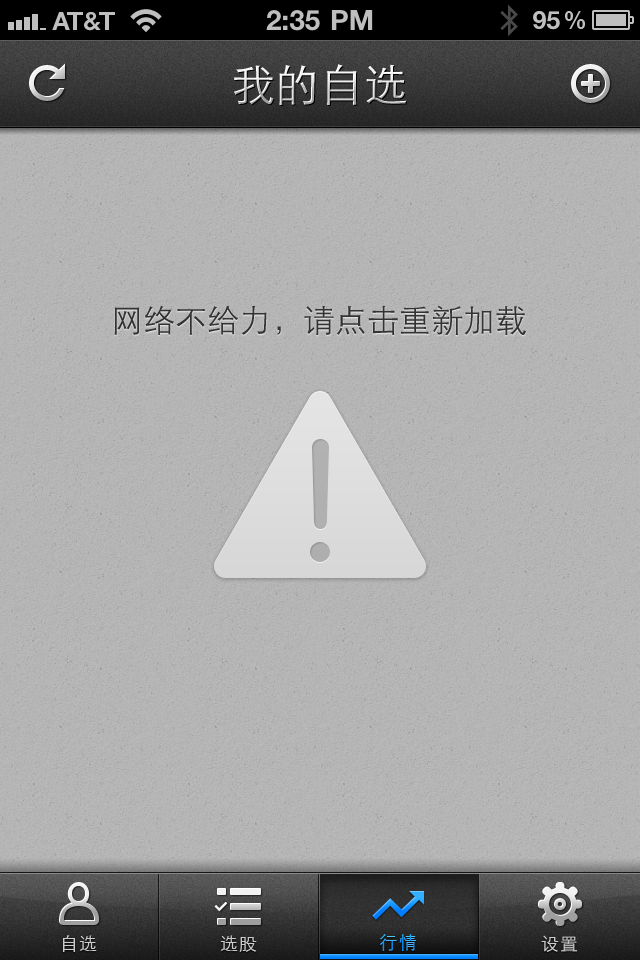
<style>
.page{position:relative;width:640px;height:960px}
.page>*{position:absolute;margin:0}
.t1{font:44px "STXihei";letter-spacing:0.005em}
.t2{font:32px "STXihei";color:#333333}
.t3{font:18px "STXihei";letter-spacing:0.05em;color:#cccccc}
.t4{font:18px "STXihei";letter-spacing:0.1em}
</style>
<div class="page">
<p class="t1" style="left:234px;top:64px;width:173px;height:41px">我的自选</p>
<p class="t2" style="left:114px;top:305px;width:412px;height:31px">网络不给力，请点击重新加载</p>
<p class="t3" style="left:62px;top:935px;width:35px;height:17px">自选</p>
<p class="t3" style="left:220px;top:935px;width:37px;height:17px">选股</p>
<p class="t4" style="left:379px;top:934px;width:38px;height:17px">行情</p>
<p class="t3" style="left:541px;top:935px;width:37px;height:17px">设置</p>
</div>
